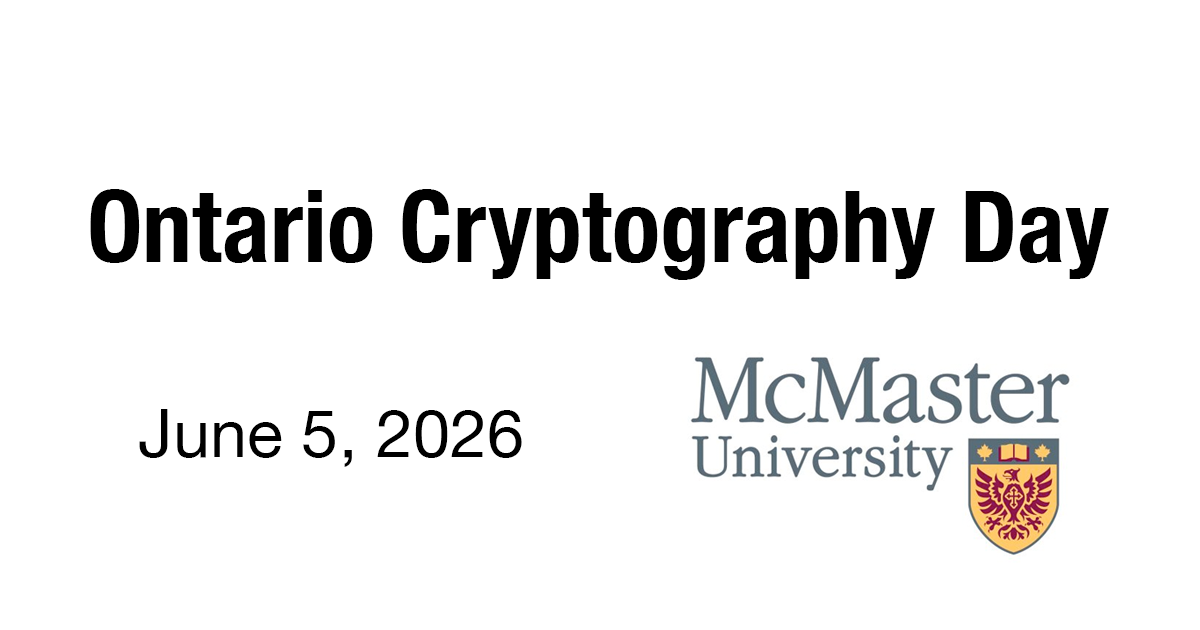
<style>
.page{position:relative;width:1200px;height:630px;background:#ffffff}
.page>*{position:absolute;margin:0}
.t1{font:100px "HelveticaNeue-CondensedBold";color:#000000}
.t2{font:66.7px "HelveticaNeue";color:#000000}
</style>
<div class="page">
<p class="t1" style="left:90px;top:189px;width:1019px;height:91px">Ontario Cryptography Day</p>
<p class="t2" style="left:139px;top:409px;width:383px;height:58px">June 5, 2026</p>
</div>
